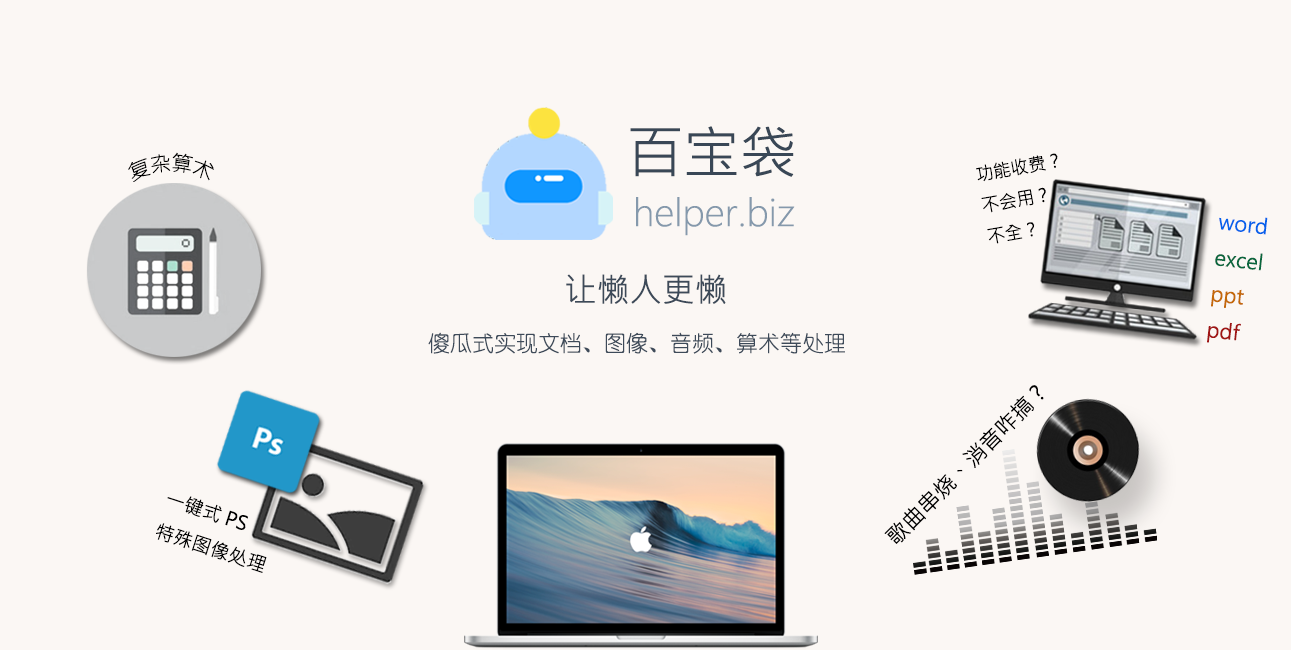
<style>
.page{position:relative;width:1291px;height:650px;background:#fbf7f4}
.page>*{position:absolute;margin:0}
.t1{font:56.4px "MicrosoftJhengHeiRegular";color:#394756}
.t2{font:21.8px "MicrosoftJhengHeiRegular";color:#000000;scale:0.84 1}
.t3{font:18.1px "MicrosoftJhengHeiRegular";color:#000000}
.t4{font:36.4px "MicrosoftJhengHeiLight";color:#8599ac}
.t5{font:20.7px "MicrosoftJhengHeiRegular";color:#09673e}
.t6{font:20.7px "MicrosoftJhengHeiRegular";color:#0662eb}
.t7{font:20.7px "MicrosoftJhengHeiRegular";color:#c46908}
.t8{font:20.7px "MicrosoftJhengHeiRegular";color:#a01414}
.t9{font:33px "MicrosoftJhengHeiRegular";color:#3d4a59}
.t10{font:22px "YouYuan";color:#3d4a59}
.t11{font:22px "MicrosoftJhengHeiRegular";color:#000000}
.t12{font:19.3px "MicrosoftJhengHeiRegular";color:#000000}
</style>
<div class="page">
<p class="t1" style="left:630px;top:126px;width:164px;height:51px">百宝袋</p>
<p class="t2" style="left:128px;top:152px;width:86px;height:30px">复杂算术</p>
<p class="t3" style="left:976px;top:153px;width:82px;height:91px;rotate:-10deg">功能收费？<br>不会用？<br>不全？</p>
<p class="t4" style="left:636px;top:197px;width:159px;height:39px">helper.biz</p>
<p class="t5" style="left:1207px;top:217px;width:61px;height:126px;rotate:6deg"><span class="t6">word<br></span>excel<br><span class="t7">ppt<br></span><span class="t8">pdf</span></p>
<p class="t9" style="left:566px;top:274px;width:160px;height:30px">让懒人更懒</p>
<p class="t10" style="left:428px;top:332px;width:417px;height:22px">傻瓜式实现文档、图像、音频、算术等处理</p>
<p class="t11" style="left:884px;top:385px;width:160px;height:159px;rotate:-45deg">歌曲串烧、消音咋搞?</p>
<p class="t12" style="left:156px;top:496px;width:111px;height:77px;rotate:18deg">一键式PS<br>特殊图像处理</p>
</div>
